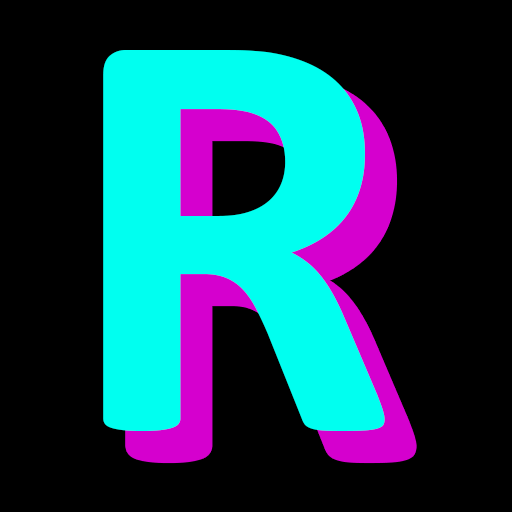
<style>
.page{position:relative;width:512px;height:512px;background:#000000}
.page>*{position:absolute;margin:0}
.t1{font:600px "Calibri-Bold";color:#00fff0}
</style>
<div class="page">
<p class="t1" style="left:103px;top:50px;width:282px;height:381px">R</p>
</div>
